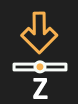
<style>
.page{position:relative;width:78px;height:104px;background:#202020}
.page>*{position:absolute;margin:0}
.t1{font:33.3px "Calibri-Bold";color:#ffffff}
</style>
<div class="page">
<p class="t1" style="left:33px;top:78px;width:15px;height:21px">Z</p>
</div>
